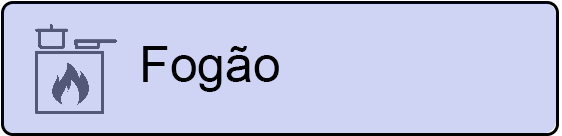
<style>
.page{position:relative;width:562px;height:136px;background:#cfd3f4}
.page>*{position:absolute;margin:0}
.t1{font:50px "ArialMT";color:#000000}
</style>
<div class="page">
<p class="t1" style="left:143px;top:46px;width:136px;height:46px">Fogão</p>
</div>
